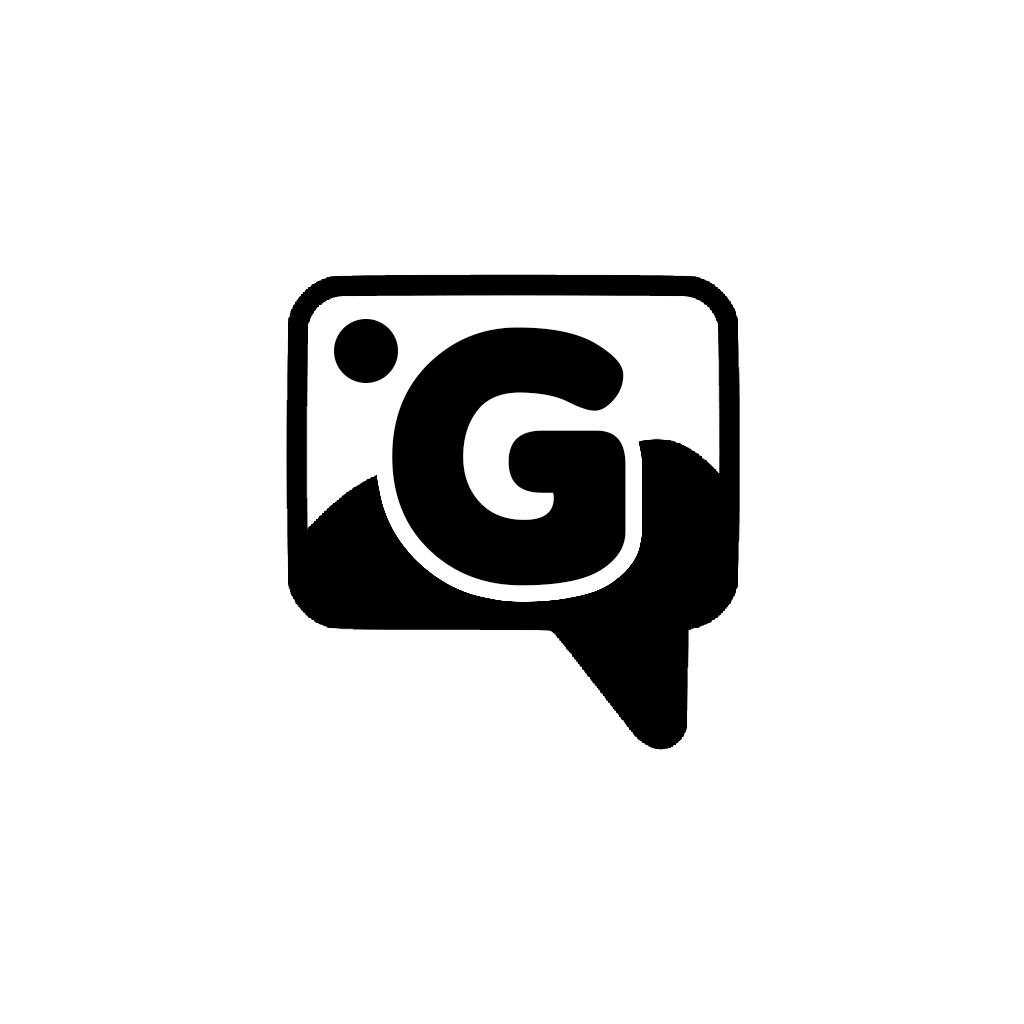
<style>
.page{position:relative;width:1024px;height:1024px;background:#ffffff}
.page>*{position:absolute;margin:0}
.t1{font:375.5px "Insaniburger";color:#000000;font-weight:bold}
</style>
<div class="page">
<p class="t1" style="left:392px;top:327px;width:234px;height:259px">G</p>
</div>
